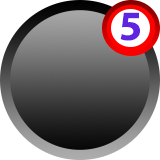
<style>
.page{position:relative;width:160px;height:160px}
.page>*{position:absolute;margin:0}
.t1{font:41.7px "MyriadPro-Bold";color:#5e24e2}
</style>
<div class="page">
<p class="t1" style="left:120px;top:12px;width:20px;height:29px">5</p>
</div>
